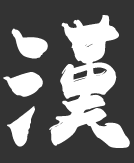
<style>
.page{position:relative;width:134px;height:163px;background:#333333}
.page>*{position:absolute;margin:0}
.t1{font:189.7px "YuWeiShuFaLiShuJMFX";letter-spacing:0.2em;color:#ffffff;font-weight:bold}
</style>
<div class="page">
<p class="t1" style="left:3px;top:15px;width:127px;height:133px">汉</p>
</div>
